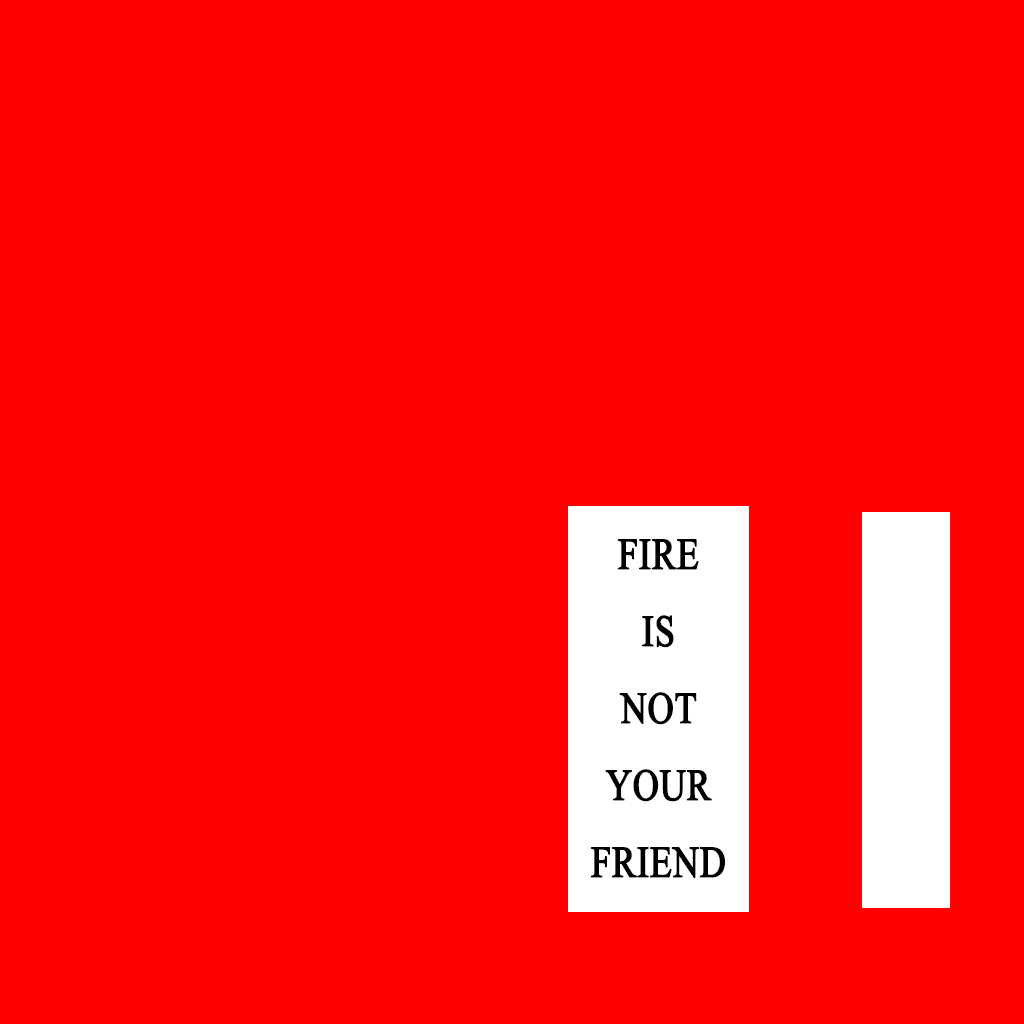
<style>
.page{position:relative;width:1024px;height:1024px;background:#ff0000}
.page>*{position:absolute;margin:0}
.t1{font:44.3px/77px "TimesNewRomanPSMT";color:#000000;font-weight:bold;scale:0.81 1}
</style>
<div class="page">
<p class="t1" style="left:590px;top:539px;width:135px;height:339px;text-align:center">FIRE<br>IS<br>NOT<br>YOUR<br>FRIEND</p>
</div>
